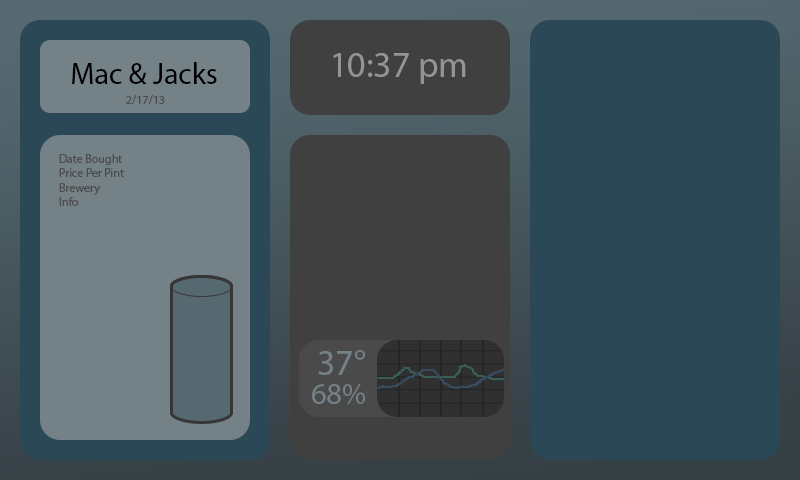
<style>
.page{position:relative;width:800px;height:480px;background:#2a4856}
.page>*{position:absolute;margin:0}
.t1{font:36px "MyriadPro-Regular";color:#949494}
.t2{font:30px "MyriadPro-Regular";color:#000000}
.t3{font:12px "MyriadPro-Regular";color:#4d4d4d}
.t4{font:36px "MyriadPro-Regular";color:#748187}
.t5{font:30px "MyriadPro-Regular";color:#748187}
</style>
<div class="page">
<p class="t1" style="left:333px;top:53px;width:133px;height:31px">10:37 pm</p>
<p class="t2" style="left:72px;top:62px;width:145px;height:22px">Mac &amp; Jacks</p>
<p class="t3" style="left:126px;top:95px;width:39px;height:9px">2/17/13</p>
<p class="t3" style="left:59px;top:154px;width:65px;height:52px">Date Bought<br>Price Per Pint<br>Brewery<br>Info</p>
<p class="t4" style="left:318px;top:350px;width:47px;height:25px">37°</p>
<p class="t5" style="left:312px;top:384px;width:53px;height:20px">68%</p>
</div>
